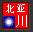
<style>
.page{position:relative;width:33px;height:32px;background:#f20000}
.page>*{position:absolute;margin:0}
.t1{font:10.4px "SimSun";color:#ffffff}
.t2{font:11.7px "SimSun";color:#ffffff}
</style>
<div class="page">
<p class="t1" style="left:6px;top:4px;width:19px;height:9px">北亚</p>
<p class="t2" style="left:16px;top:15px;width:11px;height:12px">川</p>
</div>
